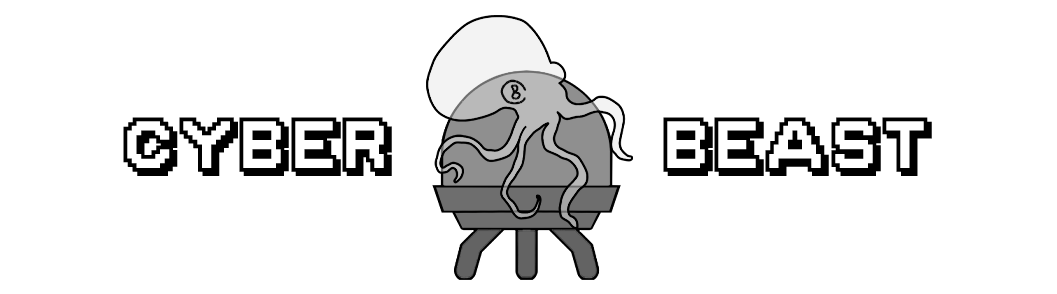
<style>
.page{position:relative;width:1057px;height:294px;background:#ffffff}
.page>*{position:absolute;margin:0}
.t1{font:75px "Golden-Age";letter-spacing:-0.01em;color:#000000}
</style>
<div class="page">
<p class="t1" style="left:123px;top:117px;width:809px;height:59px">CYBER         BEAST</p>
</div>
